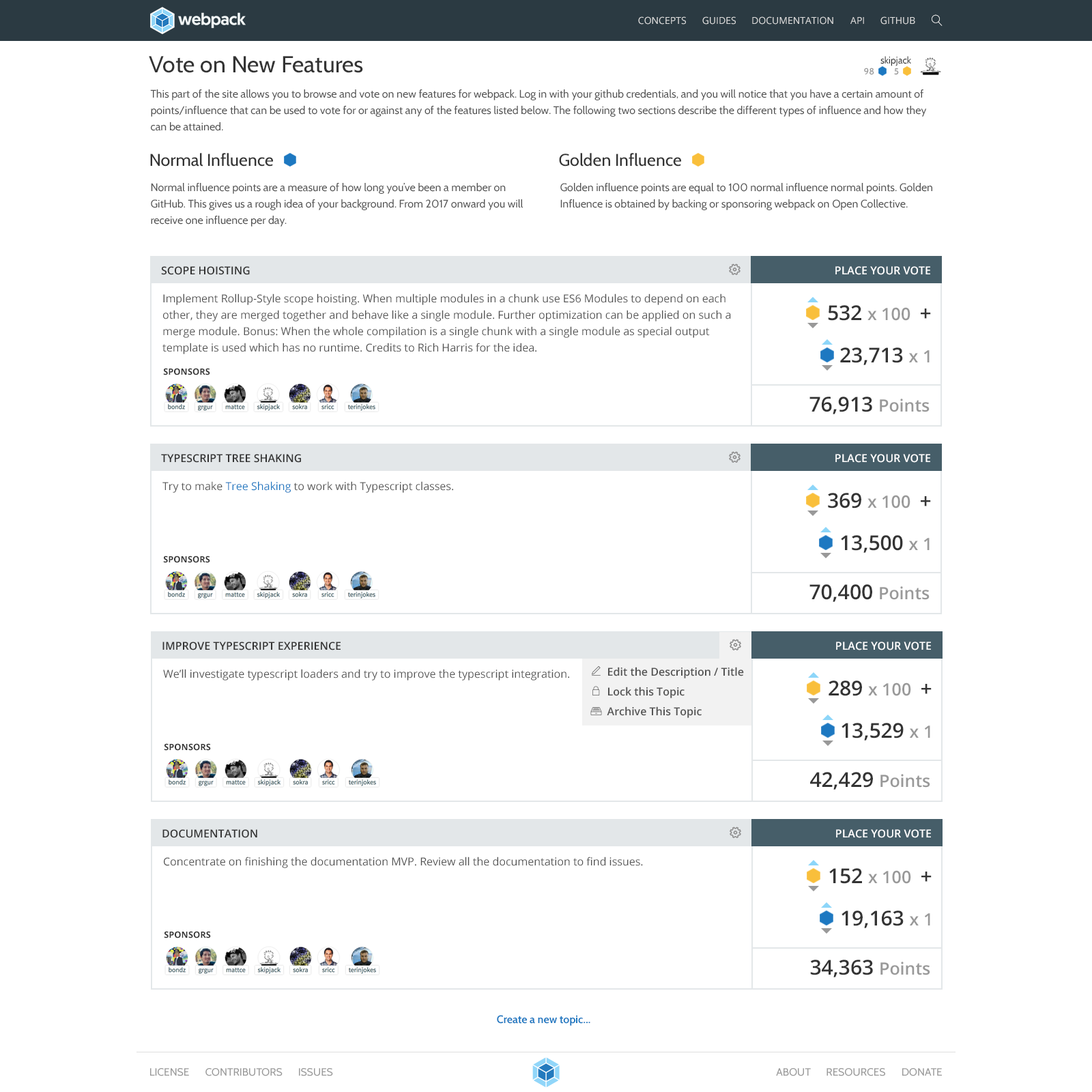
<style>
.page{position:relative;width:1092px;height:1092px;background:#ffffff}
.page>*{position:absolute;margin:0}
.t1{font:9.6px "OpenSans";color:#dedede}
.t2{font:23.2px "Cabin-Regular";color:#333333}
.t3{font:9.6px "Cabin-Regular";color:#333333}
.t4{font:8.9px "Cabin-SemiBold";color:#999999}
.t5{font:10.9px/16.4px "Cabin-Regular";color:#535353}
.t6{font:17.1px "Cabin-Regular";color:#333333}
.t7{font:10.9px "OpenSans-Semibold";color:#333333}
.t8{font:10.9px "OpenSans-Semibold";color:#ffffff}
.t9{font:10.9px/16.4px "OpenSans";color:#535353}
.t10{font:17.1px "OpenSans-Semibold";color:#999999}
.t11{font:20.5px "OpenSans-Semibold";color:#333333}
.t12{font:8.7px "OpenSans-Bold";color:#333333}
.t13{font:10.9px "OpenSans";color:#535353}
.t14{font:10.9px "OpenSans";color:#1d78c1}
.t15{font:10.9px "OpenSans-Semibold";color:#535353}
.t16{font:10.9px "Cabin-SemiBold";color:#1d78c1}
</style>
<div class="page">
<p class="t1" style="left:638px;top:16px;width:48px;height:9px">CONCEPTS</p>
<p class="t1" style="left:702px;top:16px;width:34px;height:9px">GUIDES</p>
<p class="t1" style="left:752px;top:16px;width:81px;height:9px">DOCUMENTATION</p>
<p class="t1" style="left:850px;top:17px;width:14px;height:7px">API</p>
<p class="t1" style="left:880px;top:16px;width:35px;height:9px">GITHUB</p>
<p class="t2" style="left:149px;top:56px;width:214px;height:17px">Vote on New Features</p>
<p class="t3" style="left:880px;top:56px;width:31px;height:10px">skipjack</p>
<p class="t4" style="left:864px;top:68px;width:10px;height:7px">98</p>
<p class="t4" style="left:894px;top:68px;width:5px;height:7px">5</p>
<p class="t5" style="left:150px;top:89px;width:777px;height:42px">This part of the site allows you to browse and vote on new features for webpack. Log in with your github credentials, and you will notice that you have a certain amount of points/influence that can be used to vote for or against any of the features listed below. The following two sections describe the different types of influence and how they can be attained.</p>
<p class="t6" style="left:150px;top:153px;width:123px;height:14px">Normal Influence</p>
<p class="t6" style="left:559px;top:153px;width:122px;height:14px">Golden Influence</p>
<p class="t5" style="left:151px;top:183px;width:372px;height:44px">Normal influence points are a measure of how long you’ve been a member on GitHub. This gives us a rough idea of your background. From 2017 onward you will receive one influence per day.</p>
<p class="t5" style="left:560px;top:183px;width:372px;height:27px">Golden influence points are equal to 100 normal influence normal points. Golden Influence is obtained by backing or sponsoring webpack on Open Collective.</p>
<p class="t7" style="left:161px;top:266px;width:89px;height:9px">SCOPE HOISTING</p>
<p class="t8" style="left:835px;top:266px;width:95px;height:9px">PLACE YOUR VOTE</p>
<p class="t9" style="left:162px;top:293px;width:569px;height:61px">Implement Rollup-Style scope hoisting. When multiple modules in a chunk use ES6 Modules to depend on each other, they are merged together and behave like a single module. Further optimization can be applied on such a merge module. Bonus: When the whole compilation is a single chunk with a single module as special output template is used which has no runtime. Credits to Rich Harris for the idea.</p>
<p class="t10" style="left:828px;top:305px;width:82px;height:16px"><span class="t11">532 </span>x 100</p>
<p class="t11" style="left:921px;top:308px;width:10px;height:11px">+</p>
<p class="t11" style="left:840px;top:347px;width:90px;height:18px">23,713 <span class="t10">x 1</span></p>
<p class="t12" style="left:163px;top:368px;width:47px;height:7px">SPONSORS</p>
<p class="t11" style="left:809px;top:397px;width:121px;height:17px">76,913 <span class="t10">Points</span></p>
<p class="t7" style="left:161px;top:454px;width:140px;height:9px">TYPESCRIPT TREE SHAKING</p>
<p class="t8" style="left:835px;top:454px;width:95px;height:9px">PLACE YOUR VOTE</p>
<p class="t13" style="left:162px;top:481px;width:291px;height:12px">Try to make <span class="t14">Tree Shaking</span> to work with Typescript classes.</p>
<p class="t10" style="left:828px;top:493px;width:82px;height:15px"><span class="t11">369 </span>x 100</p>
<p class="t11" style="left:921px;top:496px;width:10px;height:10px">+</p>
<p class="t11" style="left:841px;top:535px;width:89px;height:18px">13,500 <span class="t10">x 1</span></p>
<p class="t12" style="left:163px;top:556px;width:47px;height:7px">SPONSORS</p>
<p class="t11" style="left:809px;top:584px;width:121px;height:18px">70,400 <span class="t10">Points</span></p>
<p class="t7" style="left:162px;top:642px;width:179px;height:8px">IMPROVE TYPESCRIPT EXPERIENCE</p>
<p class="t8" style="left:836px;top:642px;width:95px;height:8px">PLACE YOUR VOTE</p>
<p class="t13" style="left:163px;top:669px;width:406px;height:11px">We’ll investigate typescript loaders and try to improve the typescript integration.</p>
<p class="t15" style="left:608px;top:667px;width:136px;height:11px">Edit the Description / Title</p>
<p class="t15" style="left:608px;top:687px;width:77px;height:11px">Lock this Topic</p>
<p class="t10" style="left:829px;top:680px;width:82px;height:16px"><span class="t11">289 </span>x 100</p>
<p class="t11" style="left:921px;top:684px;width:11px;height:10px">+</p>
<p class="t15" style="left:607px;top:706px;width:95px;height:12px">Archive This Topic</p>
<p class="t11" style="left:842px;top:723px;width:88px;height:18px">13,529 <span class="t10">x 1</span></p>
<p class="t12" style="left:164px;top:743px;width:47px;height:8px">SPONSORS</p>
<p class="t11" style="left:810px;top:772px;width:120px;height:18px">42,429 <span class="t10">Points</span></p>
<p class="t7" style="left:162px;top:829px;width:95px;height:9px">DOCUMENTATION</p>
<p class="t8" style="left:836px;top:829px;width:95px;height:9px">PLACE YOUR VOTE</p>
<p class="t13" style="left:164px;top:857px;width:479px;height:11px">Concentrate on finishing the documentation MVP. Review all the documentation to find issues.</p>
<p class="t10" style="left:829px;top:868px;width:82px;height:16px"><span class="t11">152 </span>x 100</p>
<p class="t11" style="left:921px;top:872px;width:11px;height:10px">+</p>
<p class="t11" style="left:842px;top:910px;width:88px;height:18px">19,163 <span class="t10">x 1</span></p>
<p class="t12" style="left:164px;top:931px;width:47px;height:7px">SPONSORS</p>
<p class="t11" style="left:810px;top:960px;width:120px;height:17px">34,363 <span class="t10">Points</span></p>
<p class="t16" style="left:497px;top:1015px;width:93px;height:11px">Create a new topic...</p>
</div>
